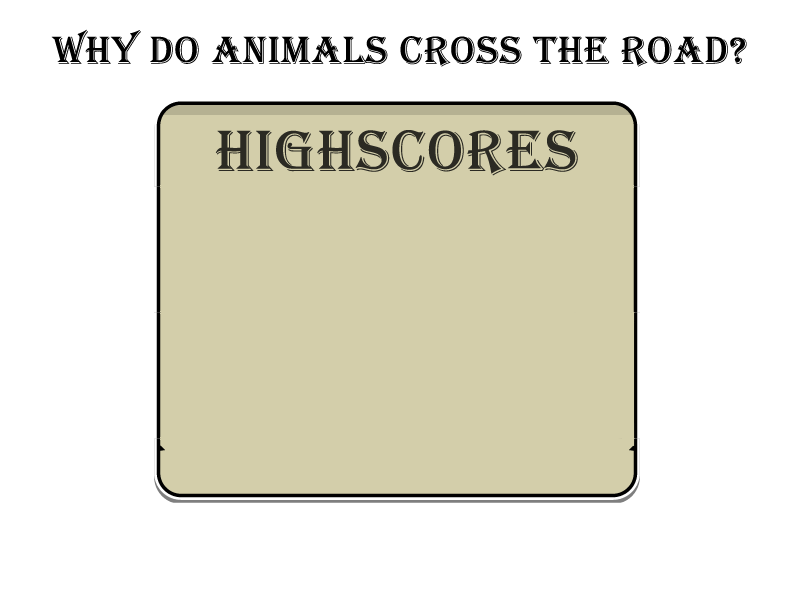
<style>
.page{position:relative;width:800px;height:600px;background:#ffffff}
.page>*{position:absolute;margin:0}
.t1{font:40px "Algerian";letter-spacing:0.025em;color:#000000}
.t2{font:60px "Algerian";letter-spacing:0.025em;color:#2b2a23}
.t3{font:36px "Algerian";letter-spacing:0.025em;color:#2b2a23}
</style>
<div class="page">
<p class="t1" style="left:51px;top:29px;width:696px;height:38px">why do animals cross the road?</p>
<p class="t2" style="left:215px;top:130px;width:363px;height:46px"><span class="t3"><br><br><br></span>highscores</p>
</div>
